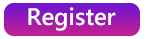
<style>
.page{position:relative;width:144px;height:39px;background:#ffffff}
.page>*{position:absolute;margin:0}
.t1{font:23.9px "YuGothicUI-Semibold";color:#ffffff}
</style>
<div class="page">
<p class="t1" style="left:28px;top:7px;width:88px;height:24px">Register</p>
</div>
